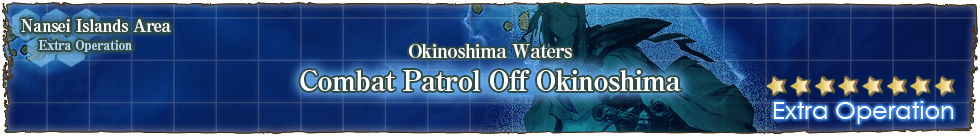
<style>
.page{position:relative;width:980px;height:136px}
.page>*{position:absolute;margin:0}
.t1{font:17px/22px "RyuminPro-ExBold";letter-spacing:-0.04em;color:#ffffff}
.t2{font:13px/22px "RyuminPro-ExBold";letter-spacing:-0.04em;color:#b9d7f5}
.t3{font:19px "RyuminPro-ExBold";letter-spacing:-0.04em;color:#ffffff}
.t4{font:28px "RyuminPro-ExBold";letter-spacing:-0.04em;color:#ffffff}
</style>
<div class="page">
<p class="t1" style="left:21px;top:19px;width:150px;height:33px">Nansei Islands Area<br>　　　<span class="t2">Extra Operation</span></p>
<p class="t3" style="left:409px;top:44px;width:163px;height:15px">Okinoshima Waters</p>
<p class="t4" style="left:300px;top:70px;width:381px;height:22px">Combat Patrol Off Okinoshima</p>
</div>
